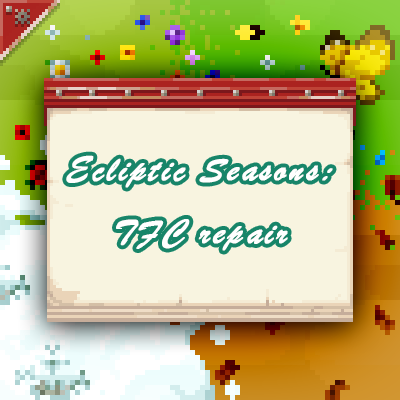
<style>
.page{position:relative;width:400px;height:400px;background:#f8f4e0}
.page>*{position:absolute;margin:0}
.t1{font:36px "STXingkai";letter-spacing:0.075em;color:#ffffff;font-weight:bold;font-style:italic}
</style>
<div class="page">
<p class="t1" style="left:66px;top:155px;width:267px;height:96px;text-align:center">Ecliptic Seasons: TFC repair</p>
</div>
